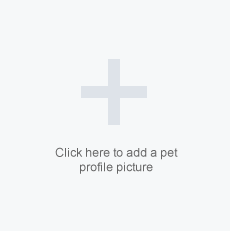
<style>
.page{position:relative;width:230px;height:231px;background:#f6f8f9}
.page>*{position:absolute;margin:0}
.t1{font:12px "ArialMT";color:#666666}
</style>
<div class="page">
<p class="t1" style="left:55px;top:147px;width:123px;height:27px;text-align:center">Click here to add a pet profile picture</p>
</div>
